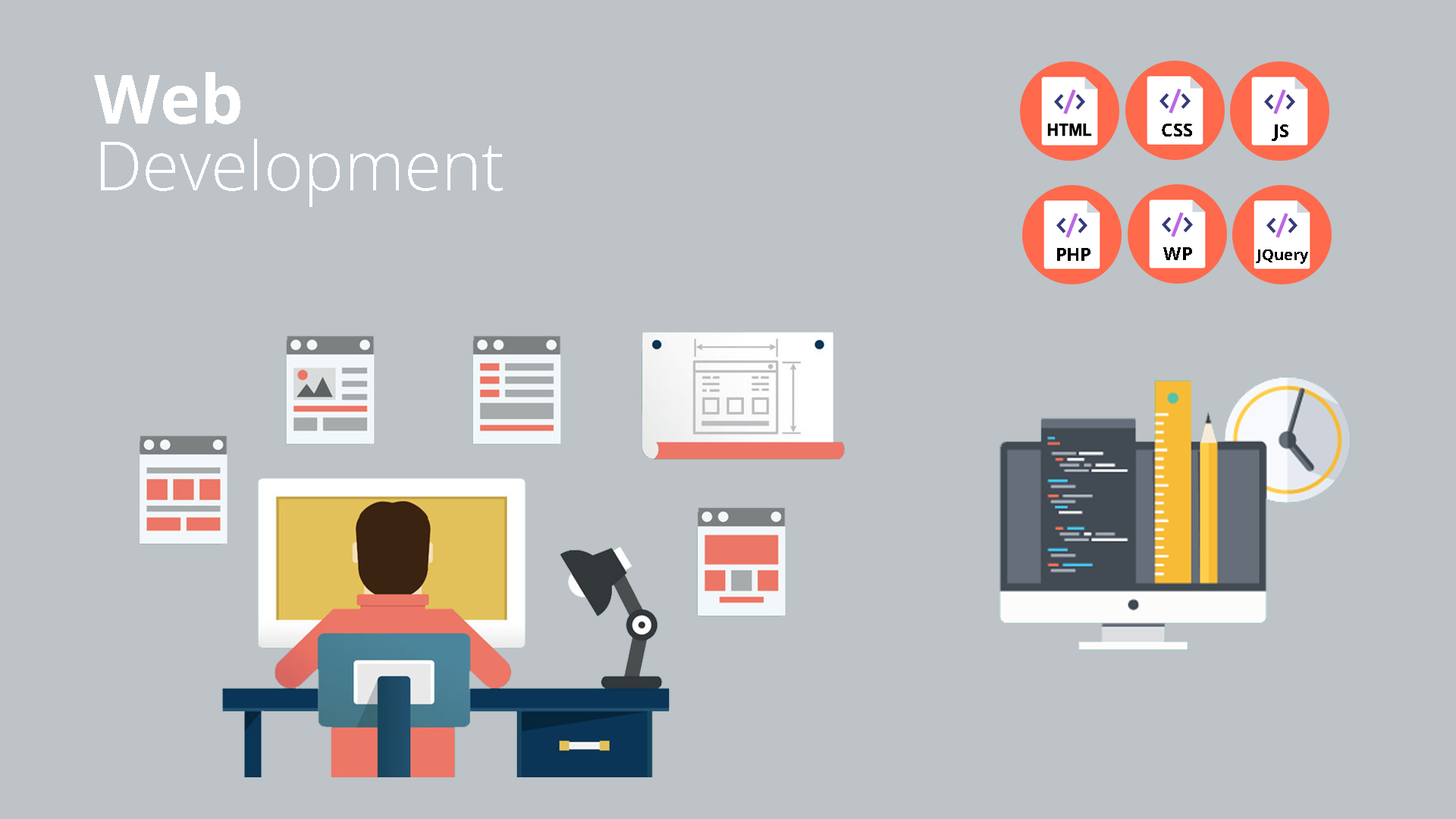
<style>
.page{position:relative;width:1456px;height:819px;background:#bdc3c7}
.page>*{position:absolute;margin:0}
.t1{font:68.2px "OpenSans-Bold";color:#ffffff}
.t2{font:18.2px "OpenSans-Bold";color:#000000}
.t3{font:68.2px "OpenSans-Light";color:#ffffff}
.t4{font:15.2px "OpenSans-Bold";color:#000000}
</style>
<div class="page">
<p class="t1" style="left:94px;top:72px;width:146px;height:52px">Web</p>
<p class="t2" style="left:1162px;top:124px;width:30px;height:12px">CSS</p>
<p class="t2" style="left:1272px;top:124px;width:16px;height:17px">JS</p>
<p class="t3" style="left:101px;top:139px;width:402px;height:68px">Development</p>
<p class="t2" style="left:1057px;top:248px;width:33px;height:13px">PHP</p>
<p class="t2" style="left:1163px;top:247px;width:29px;height:13px">WP</p>
<p class="t4" style="left:1256px;top:249px;width:52px;height:15px">JQuery</p>
</div>
